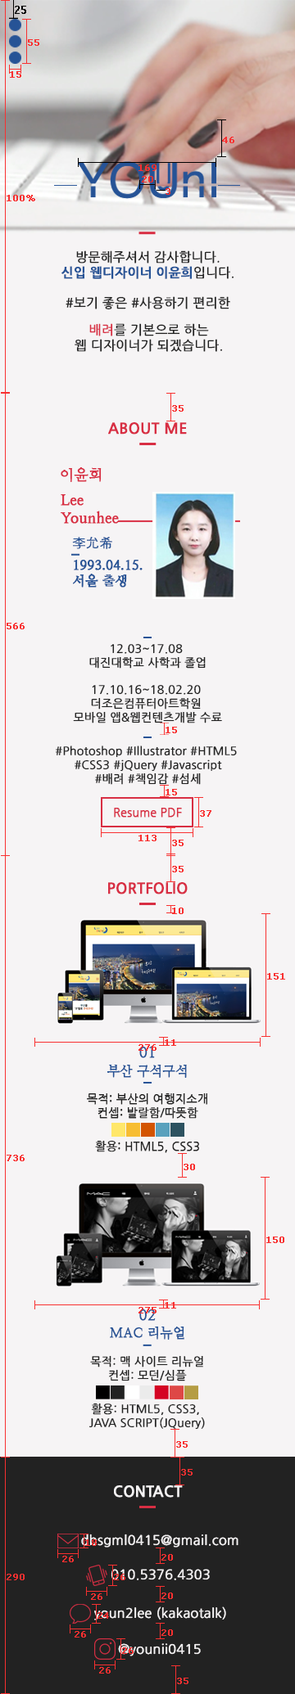
<style>
.page{position:relative;width:295px;height:1694px;background:#f6f4f5}
.page>*{position:absolute;margin:0}
.t1{font:11.2px "Verdana";color:#000000;font-weight:bold;scale:0.8 1}
.t2{font:9px "Verdana";color:#f83030;font-weight:bold}
.t3{font:12.9px "NanumGothic";color:#222222;font-weight:bold}
.t4{font:12.9px "NanumGothicBold";color:#265396;font-weight:bold}
.t5{font:12.9px "NanumGothic";color:#d82e43;font-weight:bold}
.t6{font:14.8px "NanumGothicBold";color:#d82e43;font-weight:bold}
.t7{font:14.7px "NanumMyeongjo";color:#d82e43;font-weight:bold}
.t8{font:14.7px "NanumMyeongjoBold";color:#d82e43;font-weight:bold}
.t9{font:13.1px "AppleGothic";color:#265396;font-weight:bold}
.t10{font:13.1px "NanumMyeongjoBold";color:#265396;font-weight:bold}
.t11{font:11.4px "NanumGothic";color:#222222;font-weight:bold}
.t12{font:11.5px "NanumGothic";color:#222222;font-weight:bold}
.t13{font:11.5px "NanumGothic";color:#d82e43;font-weight:bold}
.t14{font:14.7px "NanumMyeongjo";color:#265396;font-weight:bold}
.t15{font:13.1px "NanumMyeongjo";color:#265396;font-weight:bold}
.t16{font:14.8px "NanumGothicBold";color:#f6f4f5;font-weight:bold}
.t17{font:13.1px "NanumGothic";color:#f6f4f5;font-weight:bold}
.t18{font:12.9px "NanumGothic";color:#f6f4f5;font-weight:bold}
</style>
<div class="page">
<p class="t1" style="left:15px;top:6px;width:11px;height:8px">25</p>
<p class="t2" style="left:28px;top:39px;width:11px;height:7px">55</p>
<p class="t2" style="left:10px;top:71px;width:11px;height:7px">15</p>
<p class="t2" style="left:222px;top:137px;width:12px;height:6px">46</p>
<p class="t2" style="left:138px;top:164px;width:18px;height:7px">169</p>
<p class="t2" style="left:142px;top:176px;width:11px;height:6px">20</p>
<p class="t2" style="left:7px;top:195px;width:28px;height:6px">100%</p>
<p class="t2" style="left:165px;top:188px;width:5px;height:7px">3</p>
<p class="t3" style="left:61px;top:250px;width:172px;height:29px;text-align:center">방문해주셔서 감사합니다.<br><span class="t4">신입 웹디자이너 이윤희</span>입니다.</p>
<p class="t3" style="left:65px;top:296px;width:165px;height:14px">#보기 좋은 #사용하기 편리한</p>
<p class="t3" style="left:74px;top:323px;width:148px;height:29px;text-align:center"><span class="t5">배려</span>를 기본으로 하는<br>웹 디자이너가 되겠습니다.</p>
<p class="t2" style="left:172px;top:405px;width:11px;height:7px">35</p>
<p class="t6" style="left:108px;top:422px;width:79px;height:12px">ABOUT ME</p>
<p class="t7" style="left:61px;top:467px;width:40px;height:15px">이윤희</p>
<p class="t8" style="left:61px;top:494px;width:58px;height:30px">Lee<br>Younhee</p>
<p class="t9" style="left:72px;top:537px;width:40px;height:12px">李允希</p>
<p class="t10" style="left:73px;top:560px;width:69px;height:27px">1993.04.15.<br>서울 출생</p>
<p class="t2" style="left:7px;top:623px;width:18px;height:6px">566</p>
<p class="t11" style="left:73px;top:643px;width:149px;height:80px;text-align:center">12.03~17.08 <br>대진대학교 사학과 졸업<br><br>17.10.16~18.02.20 <br>더조은컴퓨터아트학원 <br>모바일 앱&amp;웹컨텐츠개발 수료</p>
<p class="t2" style="left:165px;top:727px;width:12px;height:6px">15</p>
<p class="t12" style="left:56px;top:745px;width:180px;height:40px;text-align:center">#Photoshop #Illustrator #HTML5 <br>#CSS3 #jQuery #Javascript<br>#배려 #책임감 #섬세</p>
<p class="t2" style="left:165px;top:789px;width:12px;height:6px">15</p>
<p class="t13" style="left:114px;top:808px;width:68px;height:9px">Resume PDF</p>
<p class="t2" style="left:200px;top:810px;width:11px;height:7px">37</p>
<p class="t2" style="left:138px;top:835px;width:18px;height:6px">113</p>
<p class="t2" style="left:172px;top:839px;width:11px;height:7px">35</p>
<p class="t2" style="left:172px;top:866px;width:11px;height:6px">35</p>
<p class="t6" style="left:108px;top:882px;width:79px;height:12px">PORTFOLIO</p>
<p class="t2" style="left:172px;top:907px;width:11px;height:7px">10</p>
<p class="t2" style="left:267px;top:973px;width:18px;height:6px">151</p>
<p class="t2" style="left:138px;top:1044px;width:18px;height:7px">276</p>
<p class="t14" style="left:139px;top:1046px;width:16px;height:12px">01</p>
<p class="t2" style="left:164px;top:1039px;width:12px;height:7px">11</p>
<p class="t15" style="left:106px;top:1064px;width:81px;height:14px">부산 구석구석</p>
<p class="t12" style="left:87px;top:1093px;width:120px;height:25px;text-align:center">목적: 부산의 여행지소개<br>컨셉: 발랄함/따뜻함</p>
<p class="t12" style="left:95px;top:1140px;width:104px;height:13px">활용: HTML5, CSS3</p>
<p class="t2" style="left:7px;top:1154px;width:18px;height:7px">736</p>
<p class="t2" style="left:183px;top:1163px;width:12px;height:7px">30</p>
<p class="t2" style="left:266px;top:1236px;width:18px;height:7px">150</p>
<p class="t2" style="left:164px;top:1302px;width:12px;height:6px">11</p>
<p class="t2" style="left:138px;top:1307px;width:18px;height:6px">275</p>
<p class="t14" style="left:139px;top:1309px;width:16px;height:12px">02</p>
<p class="t15" style="left:110px;top:1326px;width:74px;height:13px">MAC 리뉴얼</p>
<p class="t12" style="left:90px;top:1355px;width:113px;height:26px;text-align:center">목적: 맥 사이트 리뉴얼<br>컨셉: 모던/심플</p>
<p class="t12" style="left:89px;top:1402px;width:116px;height:27px;text-align:center">활용: HTML5, CSS3, <br>JAVA SCRIPT(JQuery)</p>
<p class="t2" style="left:176px;top:1441px;width:11px;height:6px">35</p>
<p class="t2" style="left:181px;top:1469px;width:11px;height:6px">35</p>
<p class="t16" style="left:114px;top:1485px;width:68px;height:12px">CONTACT</p>
<p class="t17" style="left:81px;top:1533px;width:157px;height:14px">dbsgml0415@gmail.com</p>
<p class="t2" style="left:85px;top:1539px;width:12px;height:7px">18</p>
<p class="t2" style="left:161px;top:1554px;width:12px;height:6px">20</p>
<p class="t2" style="left:62px;top:1555px;width:12px;height:7px">26</p>
<p class="t2" style="left:7px;top:1573px;width:18px;height:7px">290</p>
<p class="t17" style="left:110px;top:1568px;width:99px;height:12px">010.5376.4303</p>
<p class="t2" style="left:114px;top:1573px;width:11px;height:7px">26</p>
<p class="t2" style="left:91px;top:1593px;width:11px;height:7px">26</p>
<p class="t2" style="left:161px;top:1592px;width:12px;height:7px">20</p>
<p class="t18" style="left:94px;top:1606px;width:132px;height:14px">youn2lee (kakaotalk)</p>
<p class="t2" style="left:97px;top:1612px;width:12px;height:6px">24</p>
<p class="t2" style="left:74px;top:1631px;width:12px;height:6px">26</p>
<p class="t2" style="left:161px;top:1629px;width:12px;height:7px">20</p>
<p class="t18" style="left:118px;top:1643px;width:82px;height:13px">@younii0415</p>
<p class="t2" style="left:122px;top:1647px;width:11px;height:7px">26</p>
<p class="t2" style="left:99px;top:1667px;width:11px;height:6px">26</p>
<p class="t2" style="left:177px;top:1677px;width:11px;height:7px">35</p>
</div>
